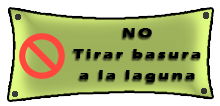
<style>
.page{position:relative;width:220px;height:106px;background:#ffffff}
.page>*{position:absolute;margin:0}
.t1{font:12.7px "ErasITC-Bold";letter-spacing:0.137em;color:#000000;font-weight:bold;scale:1.27 1}
</style>
<div class="page">
<p class="t1" style="left:73px;top:28px;width:128px;height:55px;text-align:center">NO<br>Tirar basura<br>a la laguna</p>
</div>
